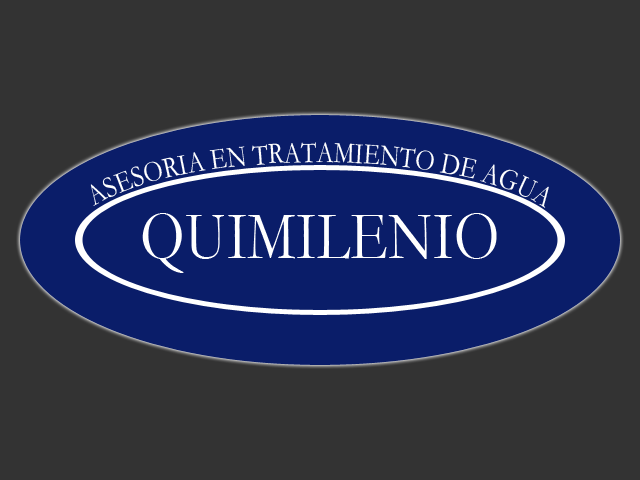
<style>
.page{position:relative;width:640px;height:480px;background:#333333}
.page>*{position:absolute;margin:0}
.t1{font:30px "Garamond";color:#ffffff;scale:0.83 1}
.t2{font:70px "Garamond";color:#ffffff;scale:0.83 1}
</style>
<div class="page">
<p class="t1" style="left:90px;top:142px;width:459px;height:66px">ASESORIA EN TRATAMIENTO DE AGUA</p>
<p class="t2" style="left:142px;top:213px;width:355px;height:60px">QUIMILENIO</p>
</div>
